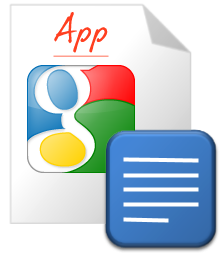
<style>
.page{position:relative;width:222px;height:256px;background:#ffffff}
.page>*{position:absolute;margin:0}
.t1{font:36px "DearJoe5CASUAL";color:#ff3f20;text-decoration:underline}
</style>
<div class="page">
<p class="t1" style="left:53px;top:12px;width:56px;height:45px">App</p>
</div>
